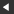
<style>
.page{position:relative;width:14px;height:14px;background:#333333}
.page>*{position:absolute;margin:0}
.t1{font:9px "Seoul-Headline";color:#ffffff}
</style>
<div class="page">
<p class="t1" style="left:3px;top:3px;width:6px;height:8px">◀</p>
</div>
